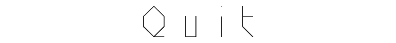
<style>
.page{position:relative;width:396px;height:43px;background:#ffffff}
.page>*{position:absolute;margin:0}
.t1{font:43.4px "Stick-Light"}
</style>
<div class="page">
<p class="t1" style="left:143px;top:6px;width:111px;height:31px">Quit</p>
</div>
